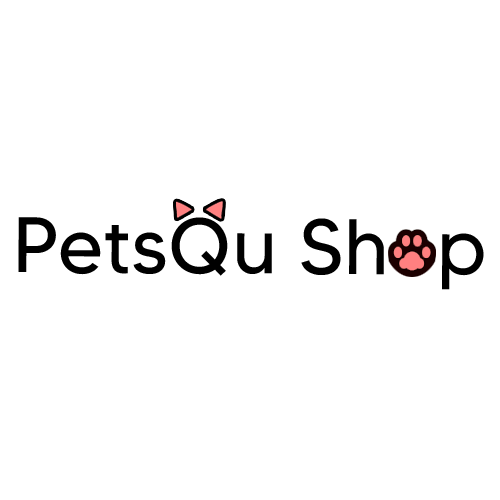
<style>
.page{position:relative;width:500px;height:500px;background:#ffffff}
.page>*{position:absolute;margin:0}
.t1{font:78.2px "MADETOMMY";letter-spacing:0.01em;color:#000000}
</style>
<div class="page">
<p class="t1" style="left:18px;top:217px;width:466px;height:73px">PetsQu Shop</p>
</div>
